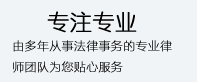
<style>
.page{position:relative;width:197px;height:82px;background:#f0f4f7}
.page>*{position:absolute;margin:0}
.t1{font:22px "YouYuan";color:#000000;font-weight:bold}
.t2{font:12px "FZLTCXHJW--GB1-0";color:#000000;font-weight:bold}
</style>
<div class="page">
<p class="t1" style="left:47px;top:11px;width:90px;height:22px">专注专业</p>
<p class="t2" style="left:13px;top:40px;width:159px;height:33px">由多年从事法律事务的专业律<br>师团队为您贴心服务</p>
</div>
